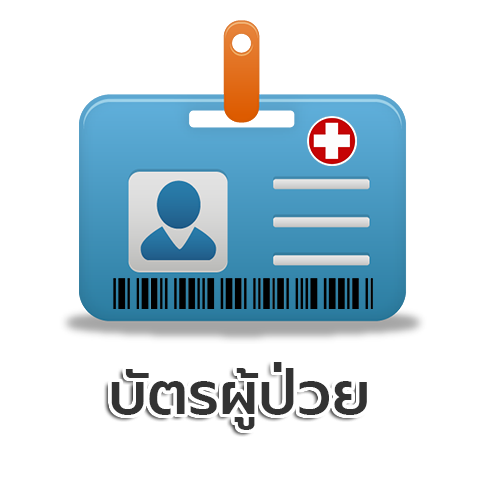
<style>
.page{position:relative;width:480px;height:480px;background:#ffffff}
.page>*{position:absolute;margin:0}
.t1{font:60px "Prompt-Medium";color:#333333}
</style>
<div class="page">
<p class="t1" style="left:273px;top:362px;width:9px;height:10px">่</p>
<p class="t1" style="left:111px;top:368px;width:256px;height:62px">บัตรผู้ป่วย</p>
</div>
